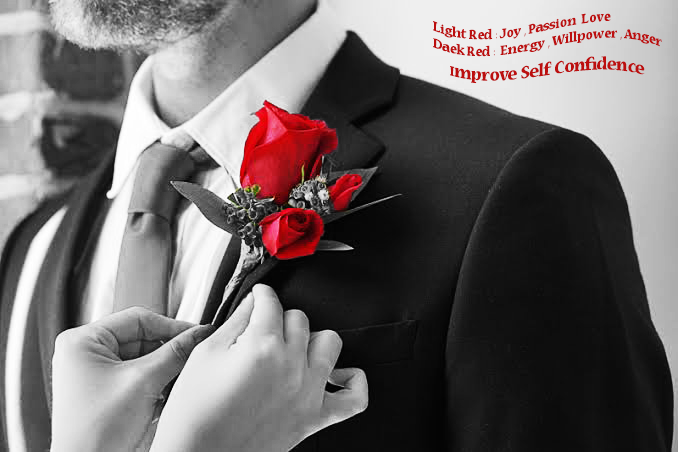
<style>
.page{position:relative;width:678px;height:452px}
.page>*{position:absolute;margin:0}
.t1{font:14px "NuevaStd-Bold";color:#bc0f0f}
.t2{font:18px "NuevaStd-Bold";color:#bc0f0f}
</style>
<div class="page">
<p class="t1" style="left:433px;top:13px;width:229px;height:44px">Light Red : Joy , Passion  Love<br>Daek Red :  Energy , Willpower , Anger</p>
<p class="t2" style="left:450px;top:56px;width:195px;height:28px"><span class="t1">I</span>mprove Self Confidence</p>
</div>
